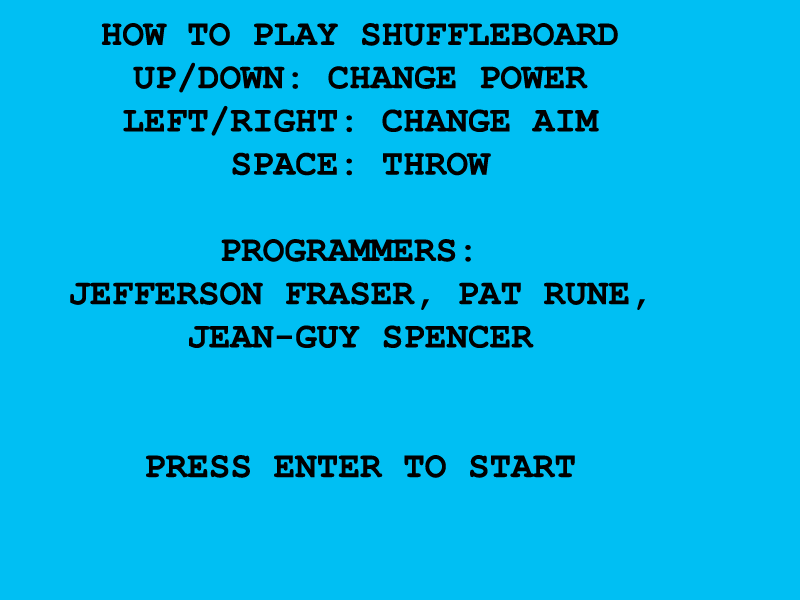
<style>
.page{position:relative;width:800px;height:600px;background:#00bff3}
.page>*{position:absolute;margin:0}
.t1{font:36px "CourierNewPS-BoldMT";color:#000000}
</style>
<div class="page">
<p class="t1" style="left:70px;top:23px;width:575px;height:455px;text-align:center">HOW TO PLAY SHUFFLEBOARD<br>UP/DOWN: CHANGE POWER<br>LEFT/RIGHT: CHANGE AIM<br>SPACE: THROW<br><br>PROGRAMMERS: <br>JEFFERSON FRASER, PAT RUNE,<br>JEAN-GUY SPENCER<br><br><br>PRESS ENTER TO START</p>
</div>
